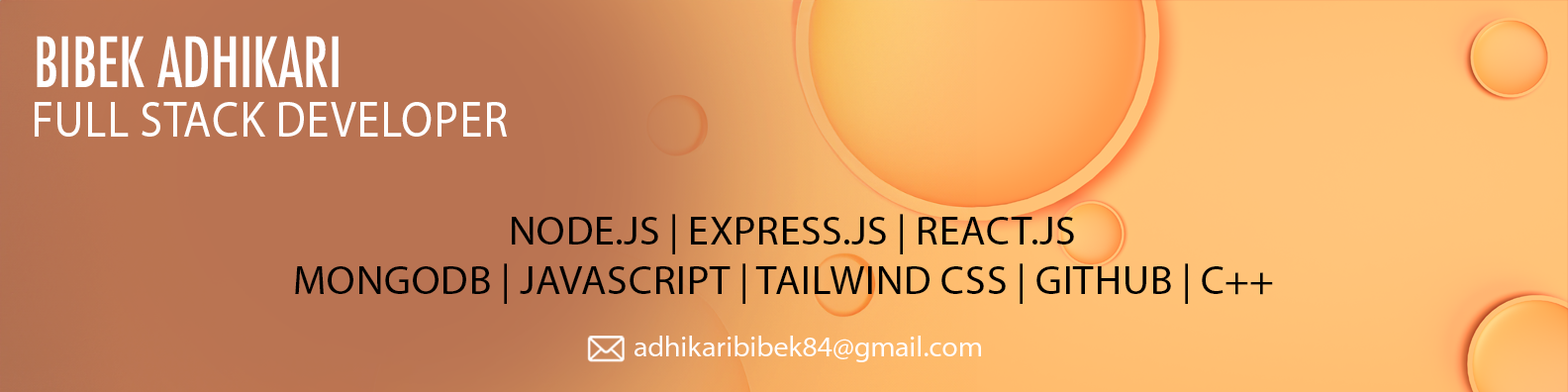
<style>
.page{position:relative;width:1568px;height:392px}
.page>*{position:absolute;margin:0}
.t1{font:67.4px "Futura-CondensedMedium";color:#ffffff;text-transform:uppercase;scale:0.91 1}
.t2{font:50.8px "MyriadPro-Regular";color:#ffffff;text-transform:uppercase;scale:0.91 1}
.t3{font:40.4px "MyriadPro-Regular";color:#000000;text-transform:uppercase}
.t4{font:28.9px "MyriadPro-Regular";color:#fffdfd}
</style>
<div class="page">
<p class="t1" style="left:37px;top:36px;width:302px;height:51px">bibek adhikari</p>
<p class="t2" style="left:35px;top:102px;width:472px;height:35px">Full Stack Developer</p>
<p class="t3" style="left:295px;top:214px;width:978px;height:90px;text-align:center">Node.js | Express.js | React.js<br> MongoDB | Javascript | Tailwind CSS | Github | C++</p>
<p class="t4" style="left:635px;top:336px;width:346px;height:26px">adhikaribibek84@gmail.com</p>
</div>
